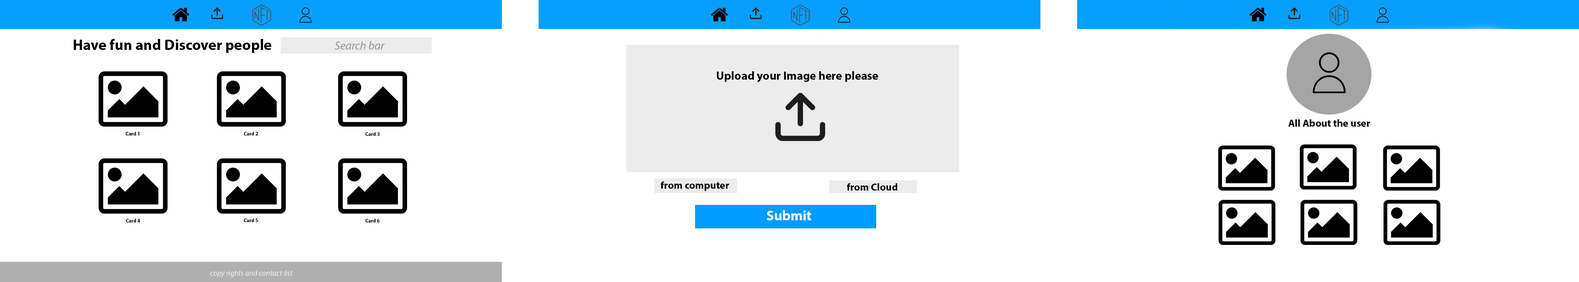
<style>
.page{position:relative;width:1579px;height:282px;background:#ffffff}
.page>*{position:absolute;margin:0}
.t1{font:15.1px "MyriadPro-Bold";color:#000000}
.t2{font:11.7px "MyriadPro-It";color:#959595}
.t3{font:11.8px "MyriadPro-Bold";color:#000000}
.t4{font:10.3px "MyriadPro-Bold";color:#010101}
.t5{font:5.1px "MyriadPro-Bold";color:#000000}
.t6{font:10.3px "MyriadPro-Bold";color:#000000}
.t7{font:14.1px "MyriadPro-Bold";color:#ffffff}
.t8{font:7.7px "MyriadPro-It";color:#ececec}
</style>
<div class="page">
<p class="t1" style="left:73px;top:39px;width:198px;height:14px">Have fun and Discover people</p>
<p class="t2" style="left:335px;top:41px;width:50px;height:9px">Search bar</p>
<p class="t3" style="left:717px;top:71px;width:161px;height:11px">Upload your Image here please</p>
<p class="t4" style="left:1288px;top:119px;width:82px;height:8px">All About the user</p>
<p class="t5" style="left:126px;top:132px;width:14px;height:4px">Card 1</p>
<p class="t5" style="left:244px;top:132px;width:14px;height:4px">Card 2</p>
<p class="t5" style="left:365px;top:132px;width:14px;height:4px">Card 3</p>
<p class="t6" style="left:660px;top:181px;width:69px;height:10px">from computer</p>
<p class="t6" style="left:847px;top:183px;width:50px;height:8px">from Cloud</p>
<p class="t5" style="left:126px;top:219px;width:14px;height:4px">Card 4</p>
<p class="t5" style="left:244px;top:219px;width:14px;height:3px">Card 5</p>
<p class="t5" style="left:365px;top:219px;width:15px;height:4px">Card 6</p>
<p class="t7" style="left:767px;top:210px;width:44px;height:10px">Submit</p>
<p class="t8" style="left:210px;top:270px;width:83px;height:7px">copy rights and contact list</p>
</div>
